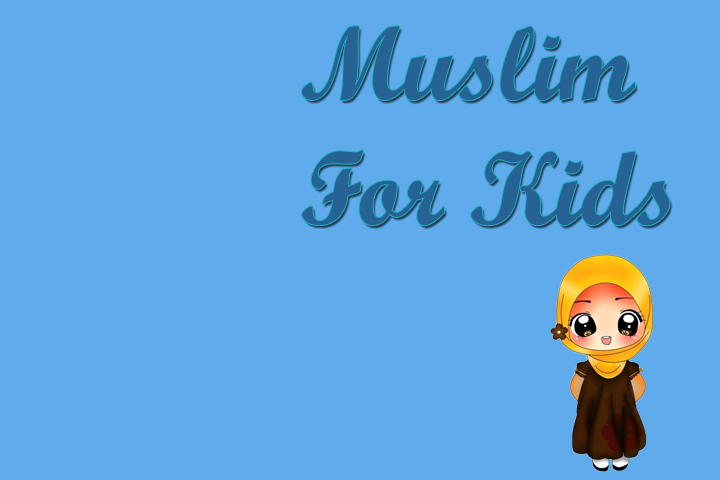
<style>
.page{position:relative;width:720px;height:480px;background:#5fabeb}
.page>*{position:absolute;margin:0}
.t1{font:104.1px "ScriptMTBold";color:#266294}
</style>
<div class="page">
<p class="t1" style="left:301px;top:26px;width:369px;height:200px">Muslim <br>For Kids</p>
</div>
